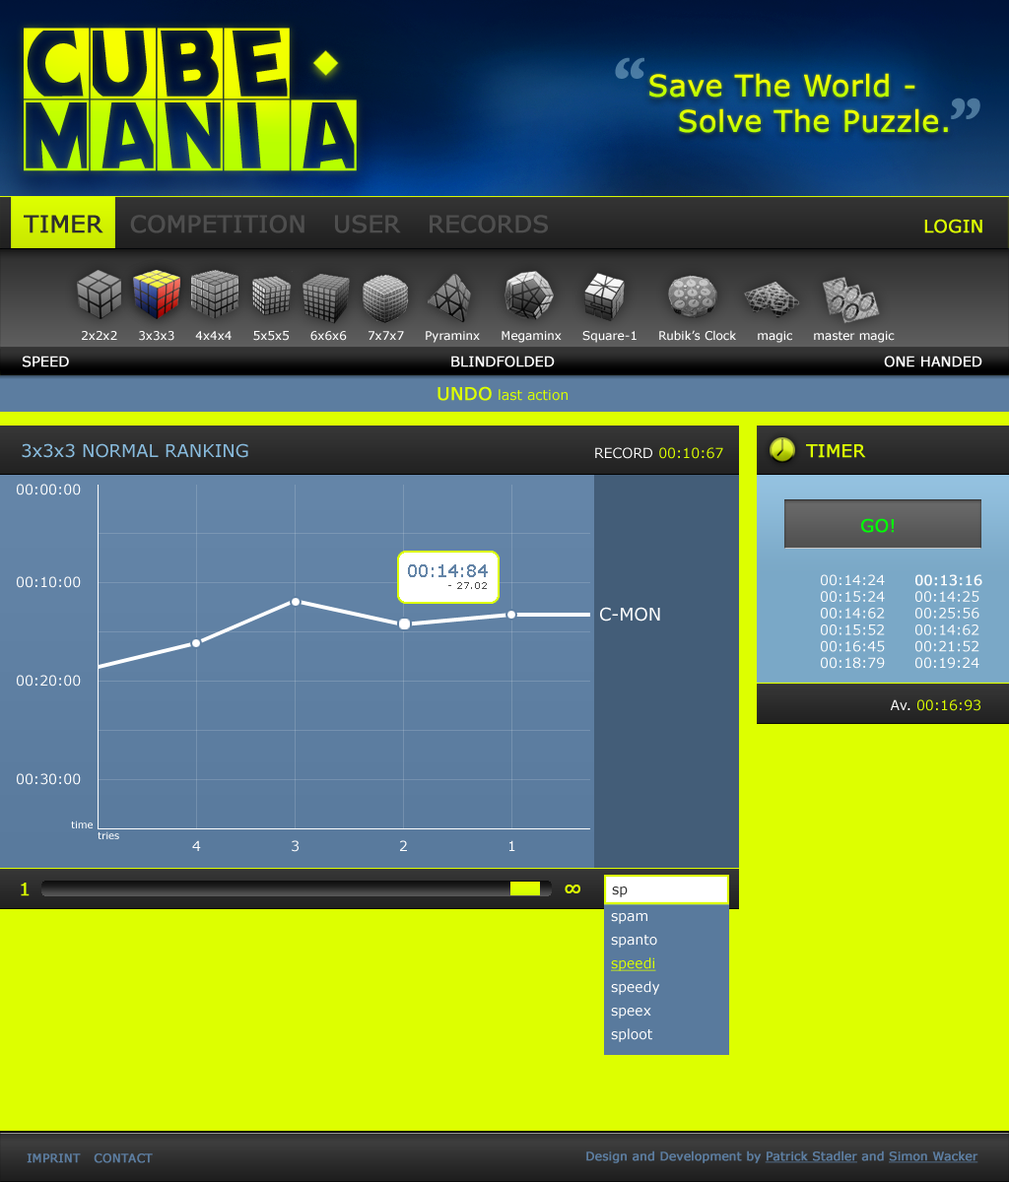
<style>
.page{position:relative;width:1009px;height:1182px;background:#ddff00}
.page>*{position:absolute;margin:0}
.t1{font:88.7px/71.9px "CometNegative";letter-spacing:-0.1em;scale:0.92 1}
.t2{font:100.5px "Nauvoo";color:#4a7ba3;font-weight:bold}
.t3{font:29.6px/35.5px "Verdana";color:#ddff00;font-weight:bold}
.t4{font:100.5px "Nauvoo";color:#4b779c;font-weight:bold}
.t5{font:23.6px "Verdana";color:#4e4e4e;font-weight:bold}
.t6{font:23.6px "Verdana";color:#2f2f2f;font-weight:bold}
.t7{font:17.7px "Verdana";color:#ddff00;font-weight:bold}
.t8{font:11.8px "Verdana";color:#ffffff}
.t9{font:13.8px "Verdana";color:#ffffff;font-weight:bold}
.t10{font:13.8px "Verdana";color:#ddff00}
.t11{font:17.7px "Verdana";color:#88bbdd}
.t12{font:13.8px "Verdana";color:#ffffff}
.t13{font:17.7px "Verdana";color:#00ff06;font-weight:bold}
.t14{font:17.7px "Verdana";color:#6384a7}
.t15{font:9.9px "Verdana";color:#505050}
.t16{font:13.8px "Verdana";color:#fffefe}
.t17{font:13.8px "Verdana";color:#fffefe;font-weight:bold}
.t18{font:17.7px "Verdana";color:#ffffff}
.t19{font:9.9px "Verdana";color:#ffffff}
.t20{font:11.8px "Verdana";color:#5c7da0;font-weight:bold}
.t21{font:11.8px "Verdana";color:#5c7da0;font-weight:bold;text-decoration:underline}
</style>
<div class="page">
<p class="t1" style="left:24px;top:28px;width:333px;height:143px">CUBE<br>MANIA</p>
<p class="t2" style="left:615px;top:57px;width:29px;height:22px">“</p>
<p class="t3" style="left:649px;top:73px;width:299px;height:60px">Save The World - <br> Solve The Puzzle.</p>
<p class="t4" style="left:951px;top:98px;width:29px;height:21px">”</p>
<p class="t5" style="left:24px;top:215px;width:524px;height:18px"><span class="t6">TIMER   </span>COMPETITION   USER   RECORDS</p>
<p class="t7" style="left:924px;top:219px;width:58px;height:14px">LOGIN</p>
<p class="t8" style="left:82px;top:330px;width:812px;height:13px">2x2x2     3x3x3     4x4x4     5x5x5     6x6x6     7x7x7     Pyraminx     Megaminx     Square-1     Rubik’s Clock     magic     master magic</p>
<p class="t9" style="left:23px;top:356px;width:46px;height:11px">SPEED</p>
<p class="t9" style="left:451px;top:356px;width:104px;height:11px">BLINDFOLDED</p>
<p class="t9" style="left:884px;top:356px;width:98px;height:11px">ONE HANDED</p>
<p class="t10" style="left:437px;top:386px;width:130px;height:15px"><span class="t7">UNDO </span>last action</p>
<p class="t11" style="left:22px;top:443px;width:226px;height:15px">3x3x3 NORMAL RANKING</p>
<p class="t10" style="left:595px;top:447px;width:128px;height:12px"><span class="t12">RECORD </span>00:10:67</p>
<p class="t7" style="left:806px;top:444px;width:60px;height:14px">TIMER</p>
<p class="t12" style="left:17px;top:484px;width:64px;height:12px">00:00:00</p>
<p class="t13" style="left:861px;top:518px;width:32px;height:15px">GO!</p>
<p class="t14" style="left:408px;top:564px;width:80px;height:25px;text-align:right">00:14:84<br><span class="t15">- 27.02</span></p>
<p class="t12" style="left:17px;top:576px;width:64px;height:12px">00:10:00</p>
<p class="t16" style="left:821px;top:574px;width:64px;height:95px">00:14:24<br>00:15:24<br>00:14:62<br>00:15:52<br>00:16:45<br>00:18:79</p>
<p class="t16" style="left:915px;top:574px;width:67px;height:95px"><span class="t17">00:13:16<br></span>00:14:25<br>00:25:56<br>00:14:62<br>00:21:52<br>00:19:24</p>
<p class="t18" style="left:600px;top:607px;width:60px;height:15px">C-MON</p>
<p class="t12" style="left:17px;top:675px;width:64px;height:12px">00:20:00</p>
<p class="t10" style="left:890px;top:699px;width:90px;height:12px"><span class="t12">Av.</span> 00:16:93</p>
<p class="t12" style="left:17px;top:773px;width:64px;height:12px">00:30:00</p>
<p class="t19" style="left:71px;top:821px;width:22px;height:7px">time</p>
<p class="t19" style="left:98px;top:831px;width:21px;height:8px">tries</p>
<p class="t12" style="left:192px;top:840px;width:9px;height:11px">4</p>
<p class="t12" style="left:292px;top:840px;width:6px;height:12px">3</p>
<p class="t12" style="left:400px;top:840px;width:7px;height:11px">2</p>
<p class="t12" style="left:509px;top:840px;width:6px;height:11px">1</p>
<p class="t7" style="left:21px;top:883px;width:9px;height:13px">1</p>
<p class="t7" style="left:564px;top:885px;width:16px;height:8px">∞</p>
<p class="t20" style="left:27px;top:1154px;width:126px;height:9px">IMPRINT   CONTACT</p>
<p class="t20" style="left:586px;top:1151px;width:392px;height:12px">Design and Development by <span class="t21">Patrick Stadler</span> and <span class="t21">Simon Wacker</span></p>
</div>
